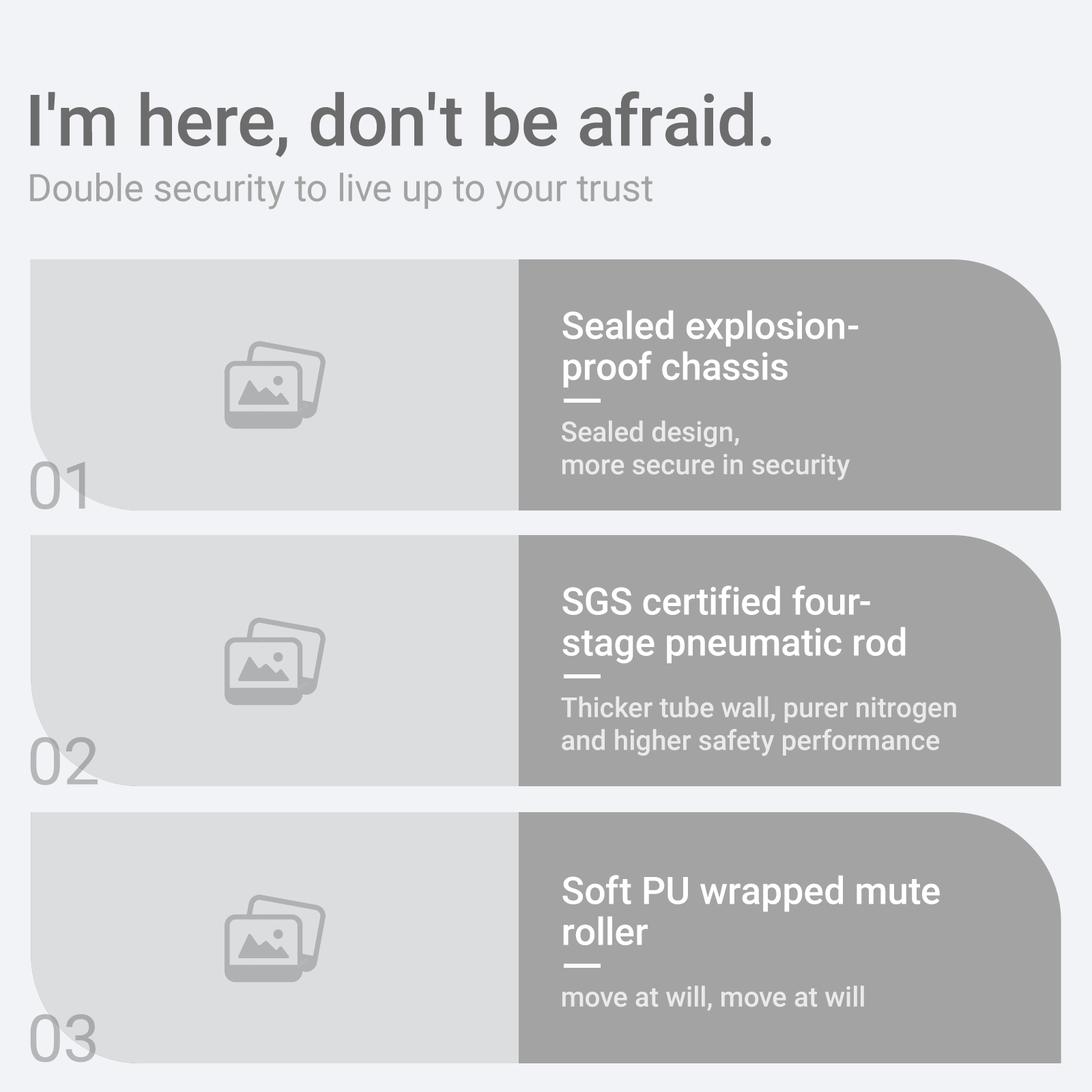
<style>
.page{position:relative;width:1092px;height:1092px;background:#f2f3f6}
.page>*{position:absolute;margin:0}
.t1{font:71.3px "Roboto-Medium";color:#6c6c6c}
.t2{font:37.9px "Roboto-Regular";color:#a3a3a3}
.t3{font:37.9px/40.9px "Roboto-Medium";color:#ffffff}
.t4{font:27.7px/32.8px "Roboto-Medium";color:#ffffff}
.t5{font:65.5px "Roboto-Regular";color:#b6b7b9}
.t6{font:27.7px "Roboto-Medium";color:#ffffff}
</style>
<div class="page">
<p class="t1" style="left:30px;top:91px;width:741px;height:67px">I'm here, don't be afraid.</p>
<p class="t2" style="left:30px;top:173px;width:622px;height:37px">Double security to live up to your trust</p>
<p class="t3" style="left:562px;top:310px;width:297px;height:78px">Sealed explosion-<br>proof chassis</p>
<p class="t4" style="left:562px;top:420px;width:288px;height:60px;opacity:0.75">Sealed design, <br>more secure in security</p>
<p class="t5" style="left:30px;top:461px;width:55px;height:49px">01</p>
<p class="t3" style="left:562px;top:586px;width:344px;height:77px">SGS certified four-<br>stage pneumatic rod</p>
<p class="t4" style="left:561px;top:696px;width:395px;height:60px;opacity:0.75">Thicker tube wall, purer nitrogen <br>and higher safety performance</p>
<p class="t5" style="left:30px;top:737px;width:68px;height:49px">02</p>
<p class="t3" style="left:562px;top:875px;width:378px;height:70px">Soft PU wrapped mute <br>roller</p>
<p class="t6" style="left:562px;top:986px;width:302px;height:25px;opacity:0.75">move at will, move at will</p>
<p class="t5" style="left:30px;top:1014px;width:66px;height:49px">03</p>
</div>
